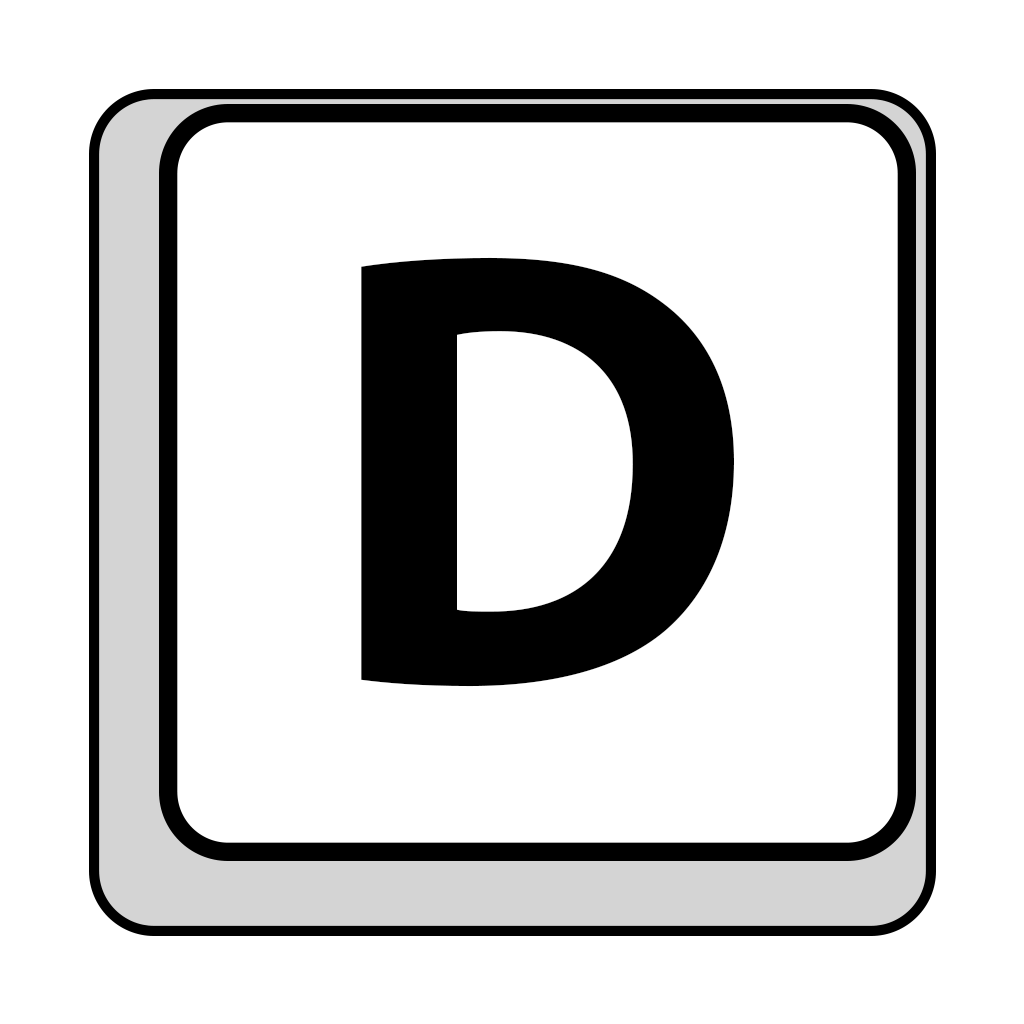
<style>
.page{position:relative;width:1024px;height:1024px;background:#ffffff}
.page>*{position:absolute;margin:0}
.t1{font:625px "MyriadPro-Bold";color:#000000}
</style>
<div class="page">
<p class="t1" style="left:361px;top:257px;width:373px;height:430px">D</p>
</div>
